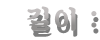
<style>
.page{position:relative;width:100px;height:40px;background:#ffffff}
.page>*{position:absolute;margin:0}
.t1{font:26.9px "SDKukdetopokki-bBd";letter-spacing:0.08em}
</style>
<div class="page">
<p class="t1" style="left:27px;top:6px;width:70px;height:25px">길이 :</p>
</div>
